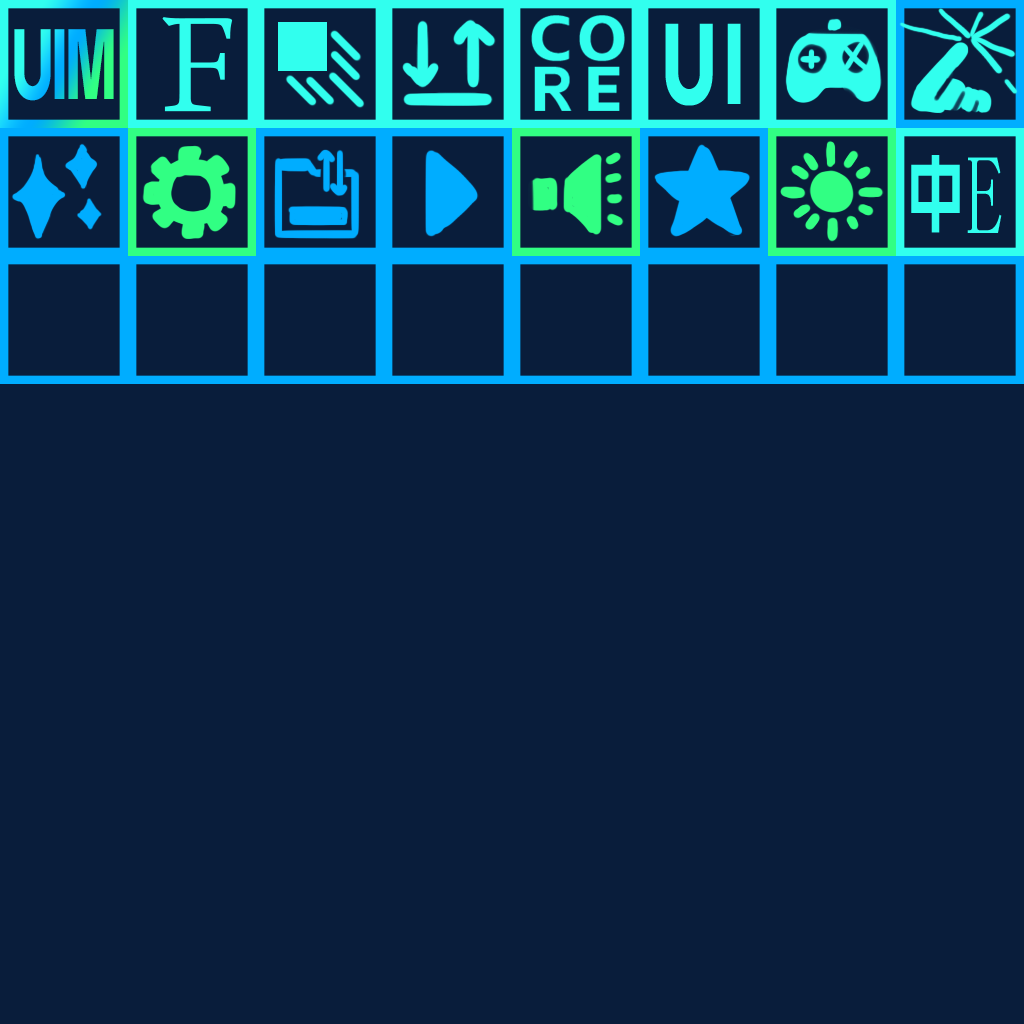
<style>
.page{position:relative;width:1024px;height:1024px;background:#091d3b}
.page>*{position:absolute;margin:0}
.t1{font:146px "GuFengXiaoKaiXique-regular";letter-spacing:0.075em;color:#31ffee;text-transform:uppercase}
.t2{font:99.6px "AlimamaShuHeiTi-Bold";letter-spacing:-0.05em;text-transform:uppercase;scale:0.59 1}
.t3{font:114.6px "AlimamaShuHeiTi-Bold";letter-spacing:0.075em;color:#31ffee;text-transform:uppercase;scale:0.67 1}
.t4{font:85.3px "AlimamaShuHeiTi-Bold";letter-spacing:0.075em;color:#31ffee;text-transform:uppercase;scale:0.67 1}
.t5{font:113.1px "FangSong";letter-spacing:0.075em;color:#31ffee;text-transform:uppercase;scale:0.67 1}
</style>
<div class="page">
<p class="t1" style="left:162px;top:17px;width:71px;height:95px">F</p>
<p class="t2" style="left:14px;top:29px;width:100px;height:72px">uim</p>
<p class="t3" style="left:665px;top:23px;width:76px;height:83px">ui</p>
<p class="t4" style="left:911px;top:155px;width:49px;height:78px">中</p>
<p class="t5" style="left:967px;top:157px;width:35px;height:76px">e</p>
</div>
